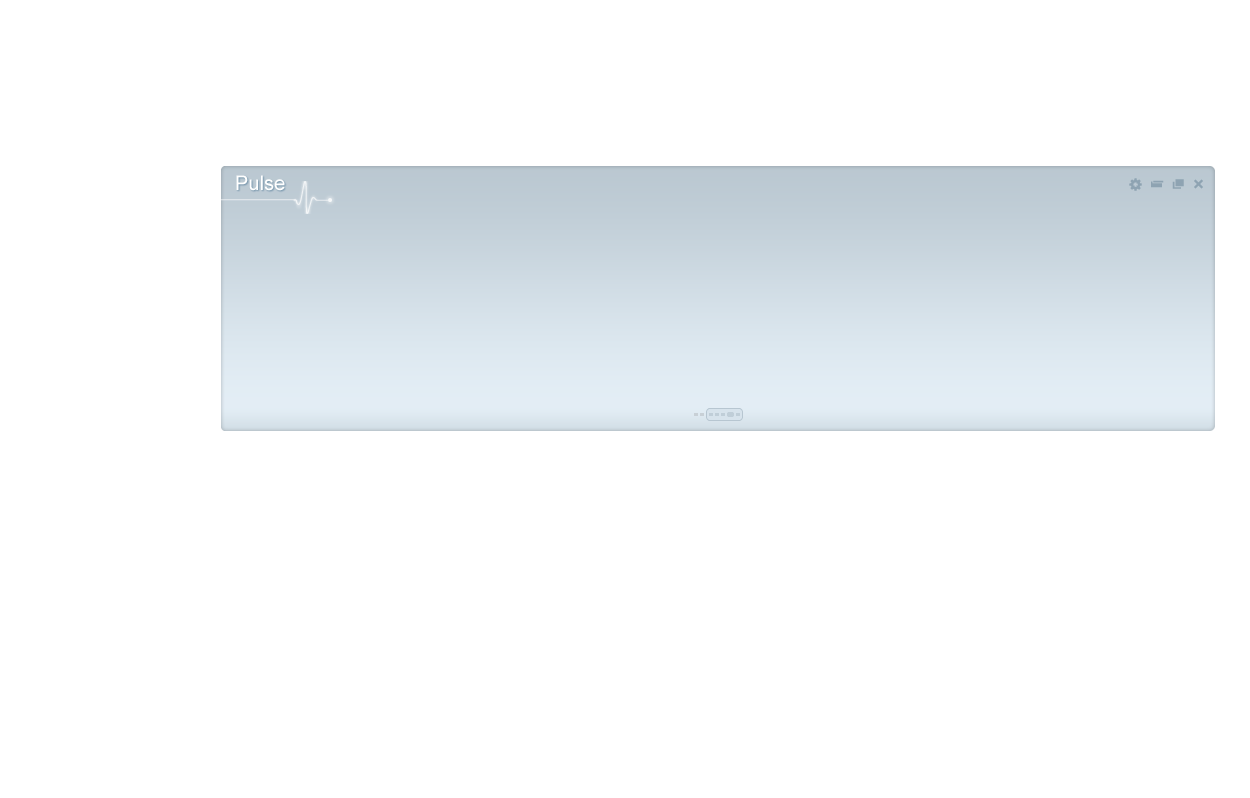
<style>
.page{position:relative;width:1250px;height:798px;background:#ffffff}
.page>*{position:absolute;margin:0}
.t1{font:20px "ArialMT";color:#ffffff}
</style>
<div class="page">
<p class="t1" style="left:236px;top:175px;width:49px;height:16px">Pulse</p>
</div>
